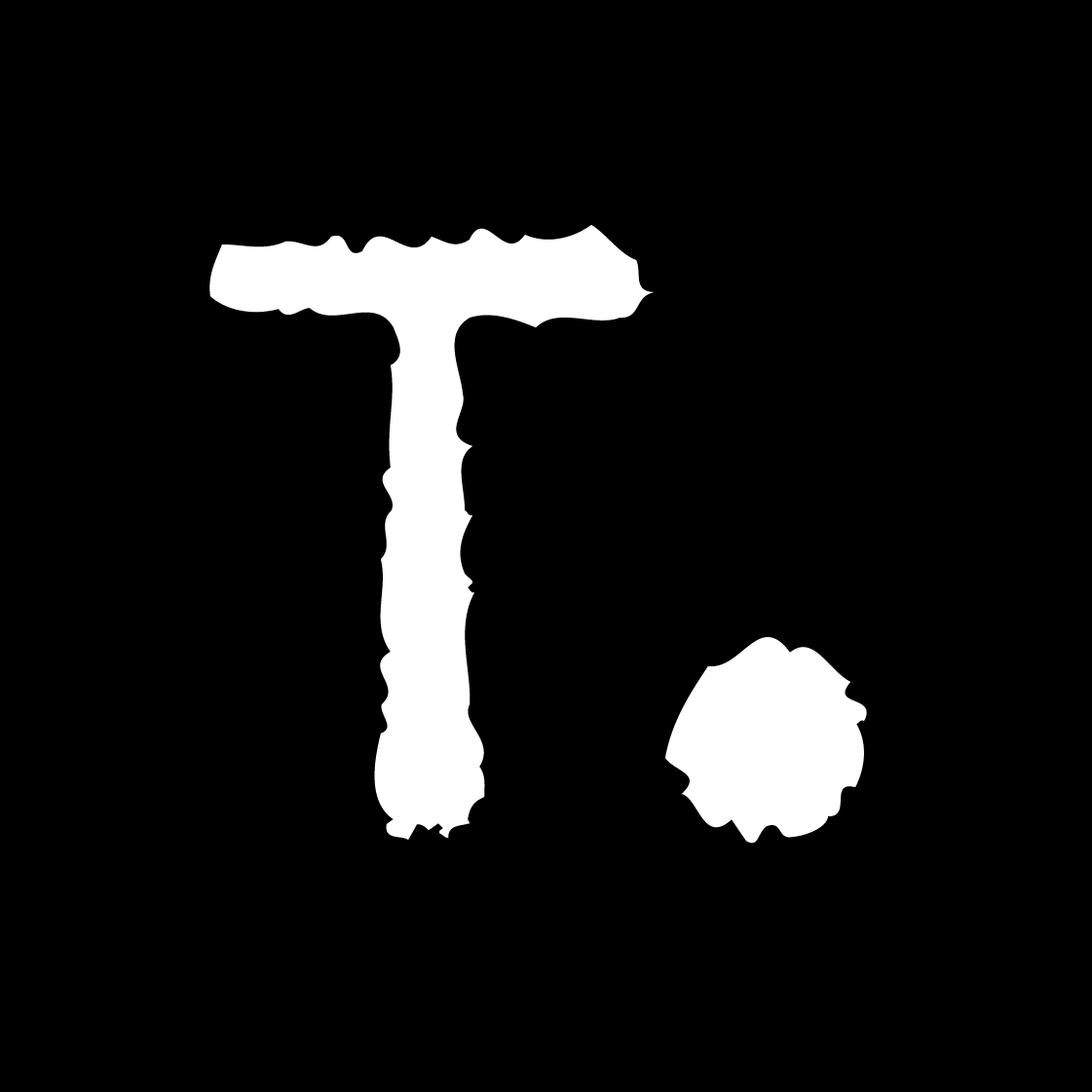
<style>
.page{position:relative;width:1092px;height:1092px;background:#000000}
.page>*{position:absolute;margin:0}
.t1{font:974.1px "Magda-Plain";letter-spacing:-0.2em;color:#ffffff}
.t2{font:974.1px "Magda-Thin";letter-spacing:-0.2em;color:#ffffff}
</style>
<div class="page">
<p class="t1" style="left:209px;top:225px;width:658px;height:619px">T<span class="t2">.</span></p>
</div>
